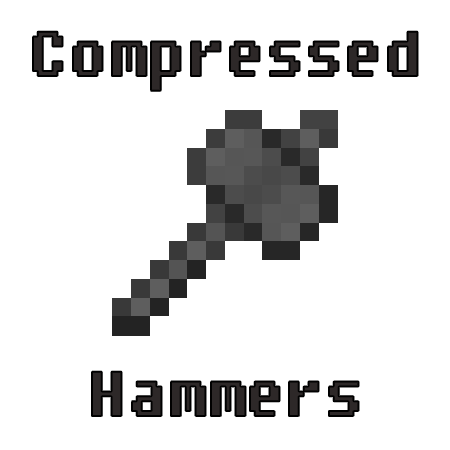
<style>
.page{position:relative;width:450px;height:450px;background:#ffffff}
.page>*{position:absolute;margin:0}
.t1{font:63px "Fixedsys";color:#2d2828}
</style>
<div class="page">
<p class="t1" style="left:33px;top:31px;width:385px;height:60px">Compressed</p>
<p class="t1" style="left:92px;top:371px;width:267px;height:45px">Hammers</p>
</div>
